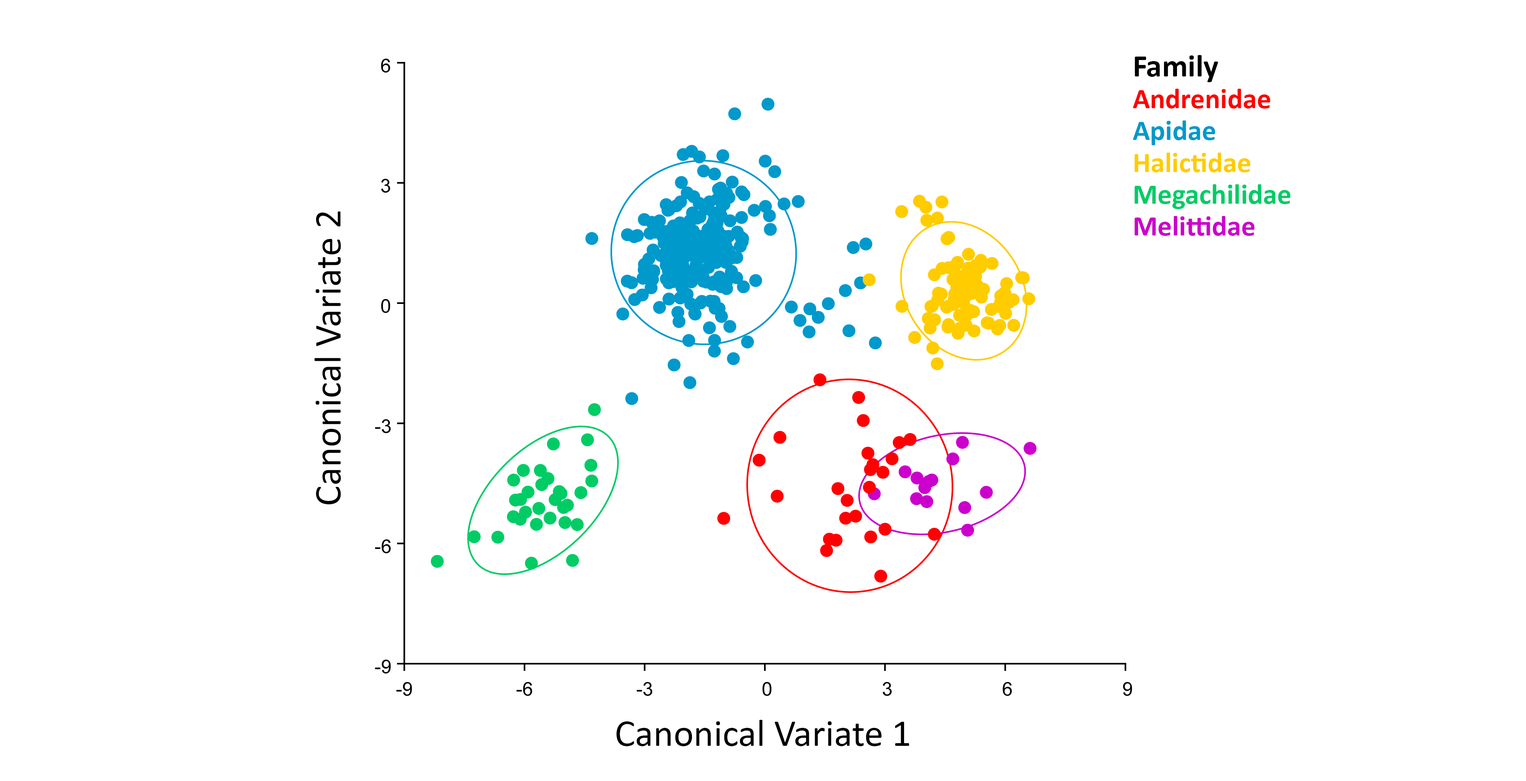
<style>
.page{position:relative;width:1526px;height:781px;background:#ffffff}
.page>*{position:absolute;margin:0}
.t1{font:28.7px/31.9px "Calibri-Bold";color:#00cc66}
.t2{font:31.9px/31.9px "Calibri-Bold";color:#000000}
.t3{font:28.7px/31.9px "Calibri-Bold";color:#ff0000}
.t4{font:28.7px/31.9px "Calibri-Bold";color:#0099cc}
.t5{font:28.7px/31.9px "Calibri-Bold";color:#ffcc00}
.t6{font:28.7px/31.9px "Calibri-Bold";color:#cc00cc}
.t7{font:38.2px "Calibri";color:#000000}
</style>
<div class="page">
<p class="t1" style="left:1133px;top:55px;width:158px;height:181px"><span class="t2">Family<br></span><span class="t3">Andrenidae<br></span><span class="t4">Apidae<br></span><span class="t5">Halictidae<br></span>Megachilidae<br><span class="t6">Melittidae</span></p>
<p class="t7" style="left:314px;top:211px;width:27px;height:294px;rotate:-90deg">Canonical Variate 2</p>
<p class="t7" style="left:616px;top:720px;width:294px;height:26px">Canonical Variate 1</p>
</div>
